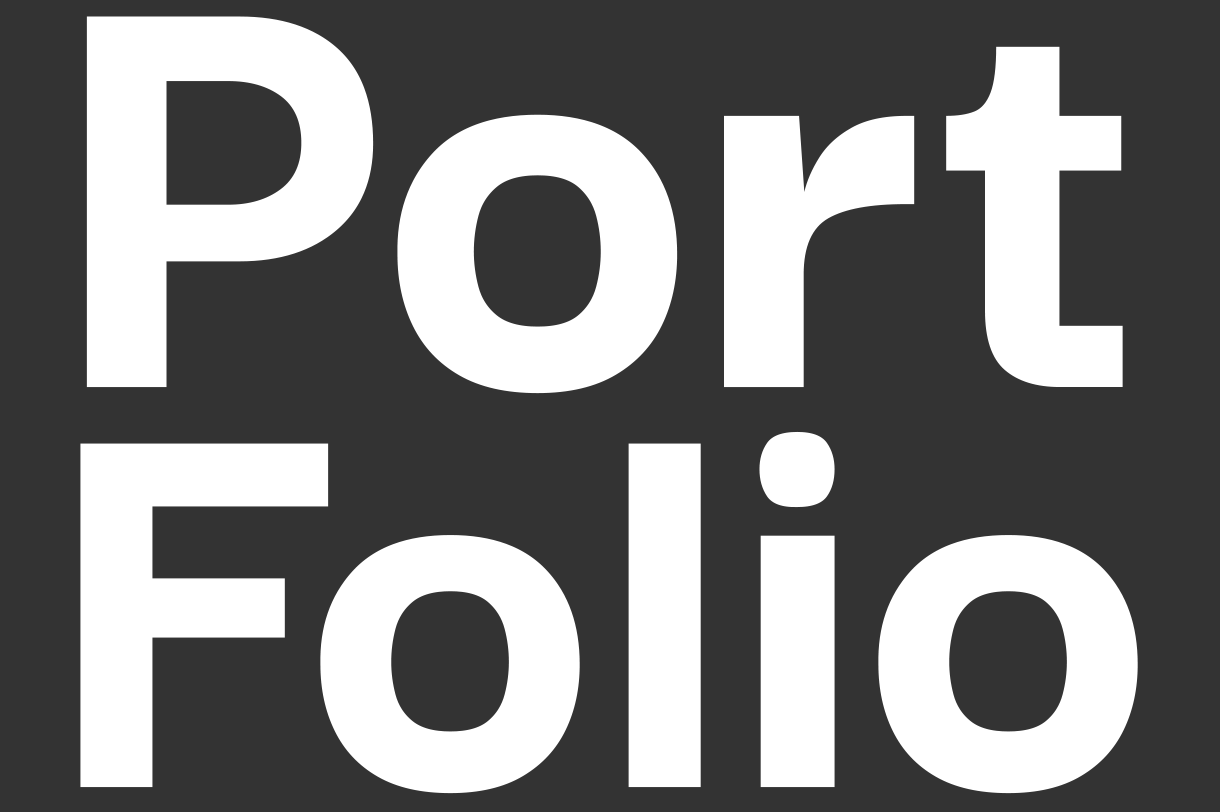
<style>
.page{position:relative;width:1220px;height:812px;background:#333333}
.page>*{position:absolute;margin:0}
.t1{font:610px/400px "DarkerGrotesque-ExtraBold";color:#ffffff}
.t2{font:658px/451.1px "DarkerGrotesque-ExtraBold";color:#ffffff}
</style>
<div class="page">
<p class="t1" style="left:80px;top:16px;width:1058px;height:778px;text-align:center"><span class="t2">Port<br></span>Folio</p>
</div>
